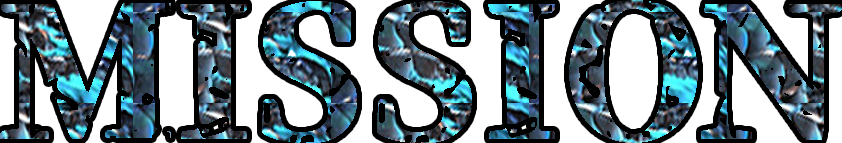
<style>
.page{position:relative;width:842px;height:143px;background:#ffffff}
.page>*{position:absolute;margin:0}
.t1{font:179px "Genkaimincho"}
</style>
<div class="page">
<p class="t1" style="left:0px;top:0px;width:842px;height:143px">MISSION</p>
</div>
